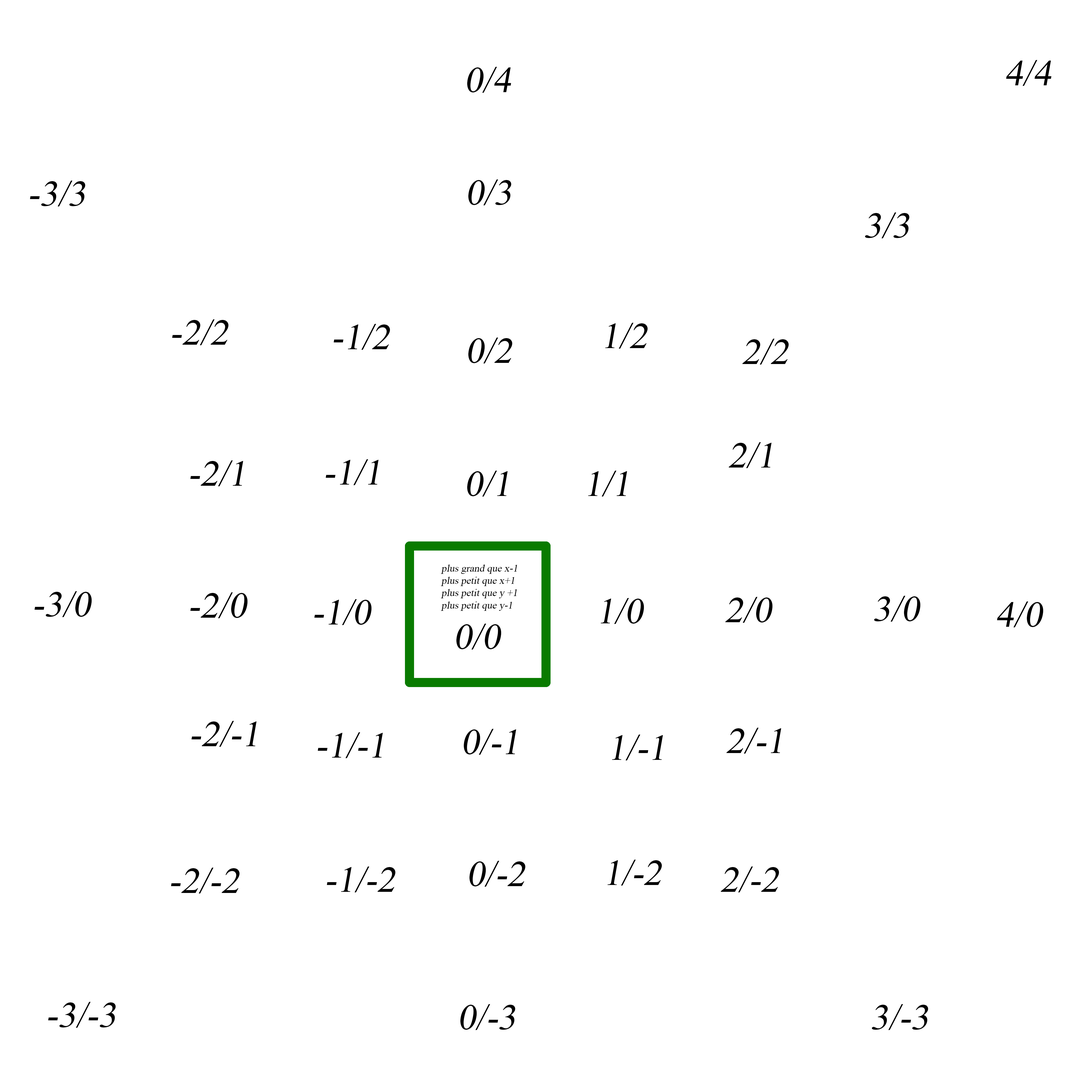
<style>
.page{position:relative;width:1092px;height:1092px;background:#ffffff}
.page>*{position:absolute;margin:0}
.t1{font:36.4px "TimesNewRomanPSMT";color:#000000;font-style:italic}
.t2{font:10.2px "TimesNewRomanPSMT";color:#000000;font-style:italic}
</style>
<div class="page">
<p class="t1" style="left:1006px;top:60px;width:46px;height:26px">4/4</p>
<p class="t1" style="left:467px;top:67px;width:44px;height:26px">0/4</p>
<p class="t1" style="left:30px;top:181px;width:55px;height:25px">-3/3</p>
<p class="t1" style="left:468px;top:179px;width:43px;height:26px">0/3</p>
<p class="t1" style="left:865px;top:212px;width:44px;height:26px">3/3</p>
<p class="t1" style="left:172px;top:319px;width:57px;height:26px">-2/2</p>
<p class="t1" style="left:334px;top:324px;width:56px;height:26px">-1/2</p>
<p class="t1" style="left:605px;top:323px;width:43px;height:26px">1/2</p>
<p class="t1" style="left:468px;top:338px;width:44px;height:25px">0/2</p>
<p class="t1" style="left:742px;top:339px;width:47px;height:26px">2/2</p>
<p class="t1" style="left:729px;top:442px;width:43px;height:26px">2/1</p>
<p class="t1" style="left:190px;top:460px;width:53px;height:26px">-2/1</p>
<p class="t1" style="left:326px;top:459px;width:53px;height:26px">-1/1</p>
<p class="t1" style="left:467px;top:471px;width:41px;height:26px">0/1</p>
<p class="t1" style="left:588px;top:471px;width:39px;height:26px">1/1</p>
<p class="t2" style="left:441px;top:564px;width:76px;height:47px">plus grand que x-1<br>plus petit que x+1<br>plus petit que y +1<br>plus petit que y-1</p>
<p class="t1" style="left:34px;top:591px;width:58px;height:26px">-3/0</p>
<p class="t1" style="left:190px;top:592px;width:58px;height:26px">-2/0</p>
<p class="t1" style="left:314px;top:599px;width:58px;height:26px">-1/0</p>
<p class="t1" style="left:601px;top:598px;width:43px;height:26px">1/0</p>
<p class="t1" style="left:725px;top:597px;width:48px;height:26px">2/0</p>
<p class="t1" style="left:874px;top:596px;width:47px;height:26px">3/0</p>
<p class="t1" style="left:997px;top:601px;width:46px;height:26px">4/0</p>
<p class="t1" style="left:456px;top:624px;width:45px;height:26px">0/0</p>
<p class="t1" style="left:191px;top:721px;width:66px;height:26px">-2/-1</p>
<p class="t1" style="left:318px;top:732px;width:65px;height:26px">-1/-1</p>
<p class="t1" style="left:464px;top:729px;width:52px;height:26px">0/-1</p>
<p class="t1" style="left:612px;top:735px;width:51px;height:25px">1/-1</p>
<p class="t1" style="left:726px;top:728px;width:55px;height:26px">2/-1</p>
<p class="t1" style="left:171px;top:868px;width:69px;height:25px">-2/-2</p>
<p class="t1" style="left:327px;top:866px;width:69px;height:26px">-1/-2</p>
<p class="t1" style="left:469px;top:861px;width:57px;height:26px">0/-2</p>
<p class="t1" style="left:607px;top:860px;width:55px;height:26px">1/-2</p>
<p class="t1" style="left:721px;top:866px;width:58px;height:26px">2/-2</p>
<p class="t1" style="left:48px;top:1002px;width:68px;height:26px">-3/-3</p>
<p class="t1" style="left:460px;top:1004px;width:55px;height:26px">0/-3</p>
<p class="t1" style="left:872px;top:1004px;width:56px;height:26px">3/-3</p>
</div>
